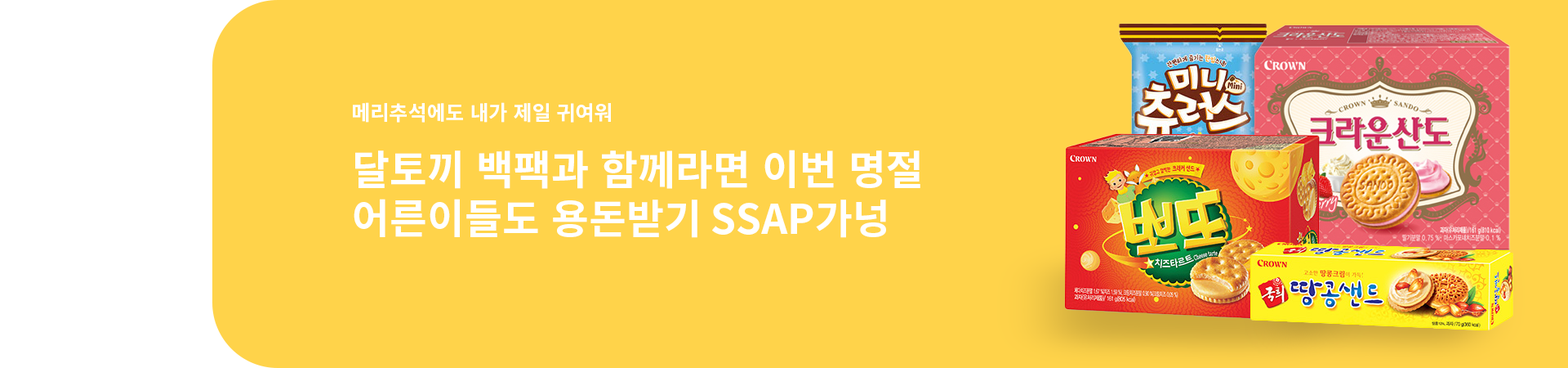
<style>
.page{position:relative;width:1568px;height:368px;background:#ffd34a}
.page>*{position:absolute;margin:0}
.t1{font:20.4px "NotoSansKR-Bold";color:#ffffff}
.t2{font:40.8px "NotoSansKR-Bold";color:#ffffff}
</style>
<div class="page">
<p class="t1" style="left:353px;top:102px;width:258px;height:20px">메리추석에도 내가 제일 귀여워</p>
<p class="t2" style="left:354px;top:149px;width:566px;height:89px">달토끼 백팩과 함께라면 이번 명절 <br>어른이들도 용돈받기 SSAP가넝</p>
</div>
